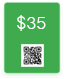
<style>
.page{position:relative;width:64px;height:79px;background:#3fab4e}
.page>*{position:absolute;margin:0}
.t1{font:20px "OriyaSangamMN";color:#ffffff}
</style>
<div class="page">
<p class="t1" style="left:17px;top:15px;width:29px;height:16px">$35</p>
</div>
